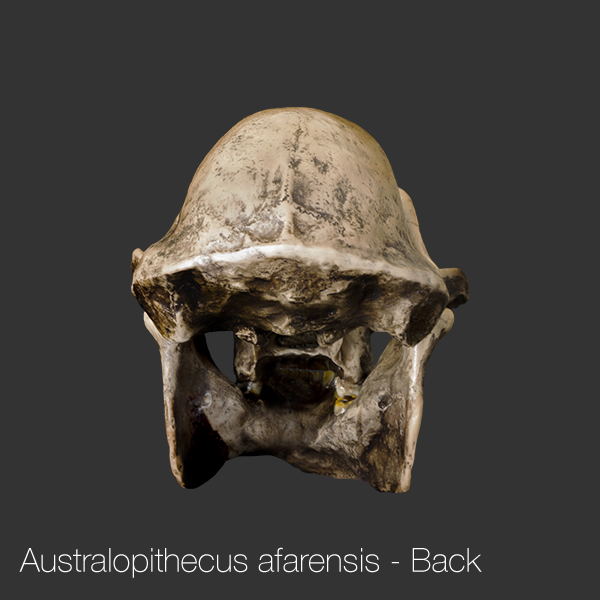
<style>
.page{position:relative;width:600px;height:600px;background:#333333}
.page>*{position:absolute;margin:0}
.t1{font:33.3px "HelveticaNeue-Thin";color:#ffffff}
</style>
<div class="page">
<p class="t1" style="left:19px;top:547px;width:463px;height:31px">Australopithecus afarensis - Back</p>
</div>
